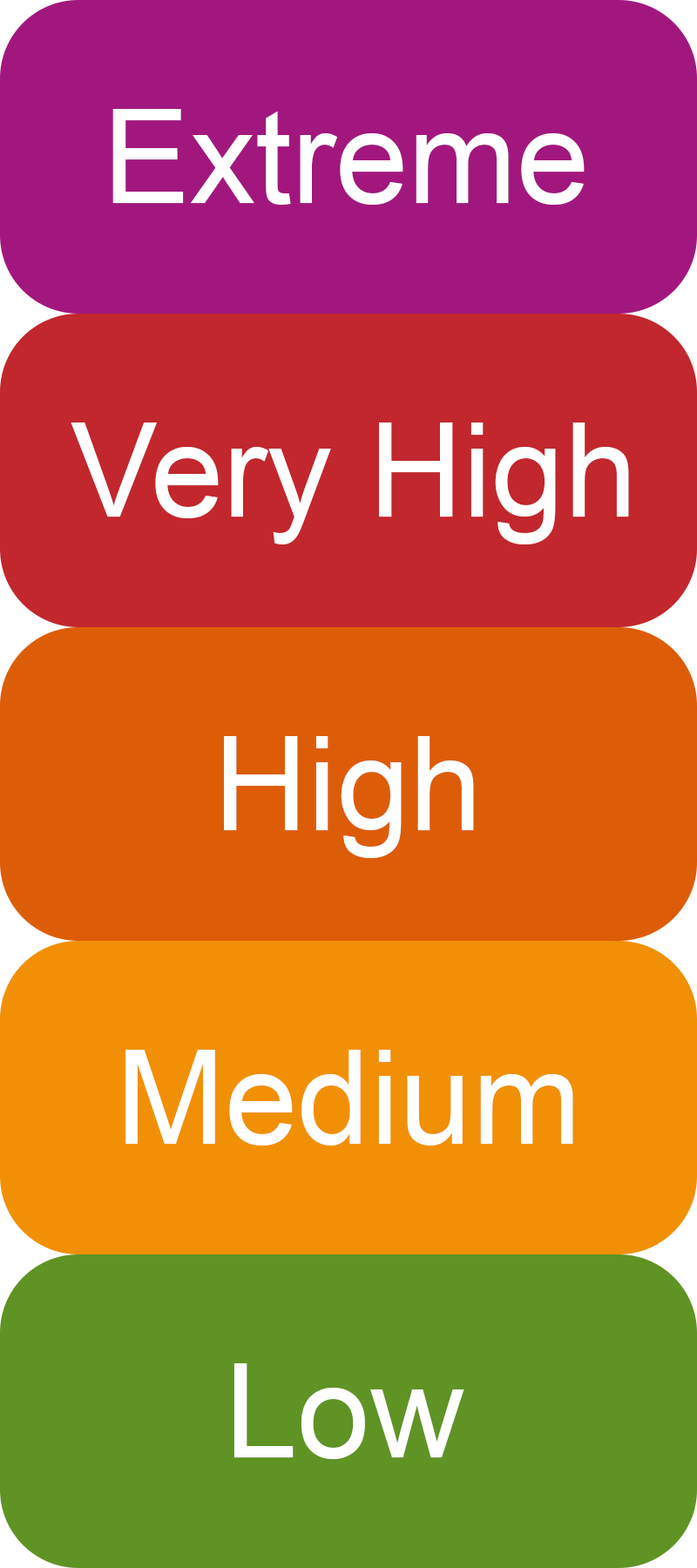
<style>
.page{position:relative;width:697px;height:1568px}
.page>*{position:absolute;margin:0}
.t1{font:130.7px "ArialMT";color:#ffffff}
</style>
<div class="page">
<p class="t1" style="left:112px;top:109px;width:473px;height:96px">Extreme</p>
<p class="t1" style="left:71px;top:422px;width:558px;height:122px">Very High</p>
<p class="t1" style="left:224px;top:736px;width:250px;height:122px">High</p>
<p class="t1" style="left:125px;top:1050px;width:448px;height:96px">Medium</p>
<p class="t1" style="left:233px;top:1363px;width:231px;height:96px">Low</p>
</div>
